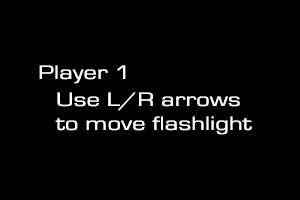
<style>
.page{position:relative;width:300px;height:200px;background:#000000}
.page>*{position:absolute;margin:0}
.t1{font:20px "EurostileRegular";color:#ffffff;scale:1.35 1}
</style>
<div class="page">
<p class="t1" style="left:39px;top:65px;width:87px;height:19px">Player 1</p>
<p class="t1" style="left:55px;top:92px;width:197px;height:43px">Use L/R arrows<br>to move flashlight</p>
</div>
